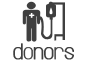
<style>
.page{position:relative;width:85px;height:63px;background:#ffffff}
.page>*{position:absolute;margin:0}
.t1{font:10.4px "LeagueGothic-Regular";letter-spacing:-0.02em;color:#ffffff;font-weight:bold}
.t2{font:22.3px "Infinity";letter-spacing:-0.02em;color:#3f3f3f;font-weight:bold}
</style>
<div class="page">
<p class="t1" style="left:29px;top:13px;width:6px;height:5px">+</p>
<p class="t2" style="left:13px;top:43px;width:61px;height:17px">donors</p>
</div>
